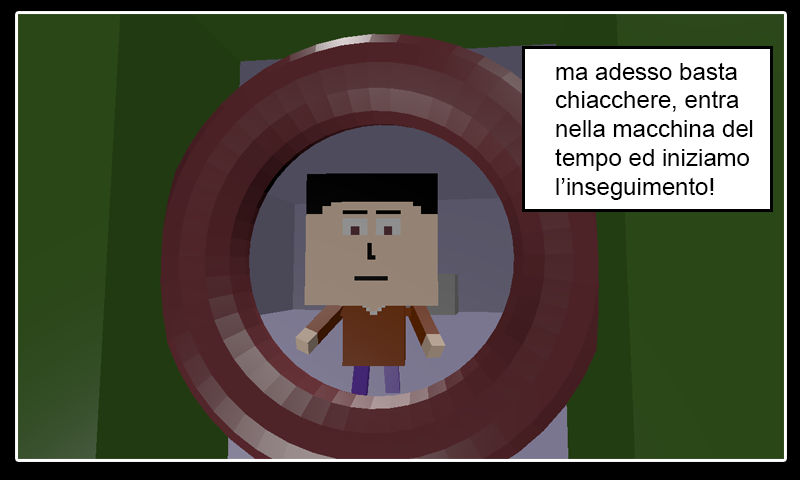
<style>
.page{position:relative;width:800px;height:480px}
.page>*{position:absolute;margin:0}
.t1{font:24px "ArialMT";color:#000000}
</style>
<div class="page">
<p class="t1" style="left:555px;top:62px;width:198px;height:138px">ma adesso basta<br>chiacchere, entra<br>nella macchina del<br>tempo ed iniziamo<br>l’inseguimento!</p>
</div>
